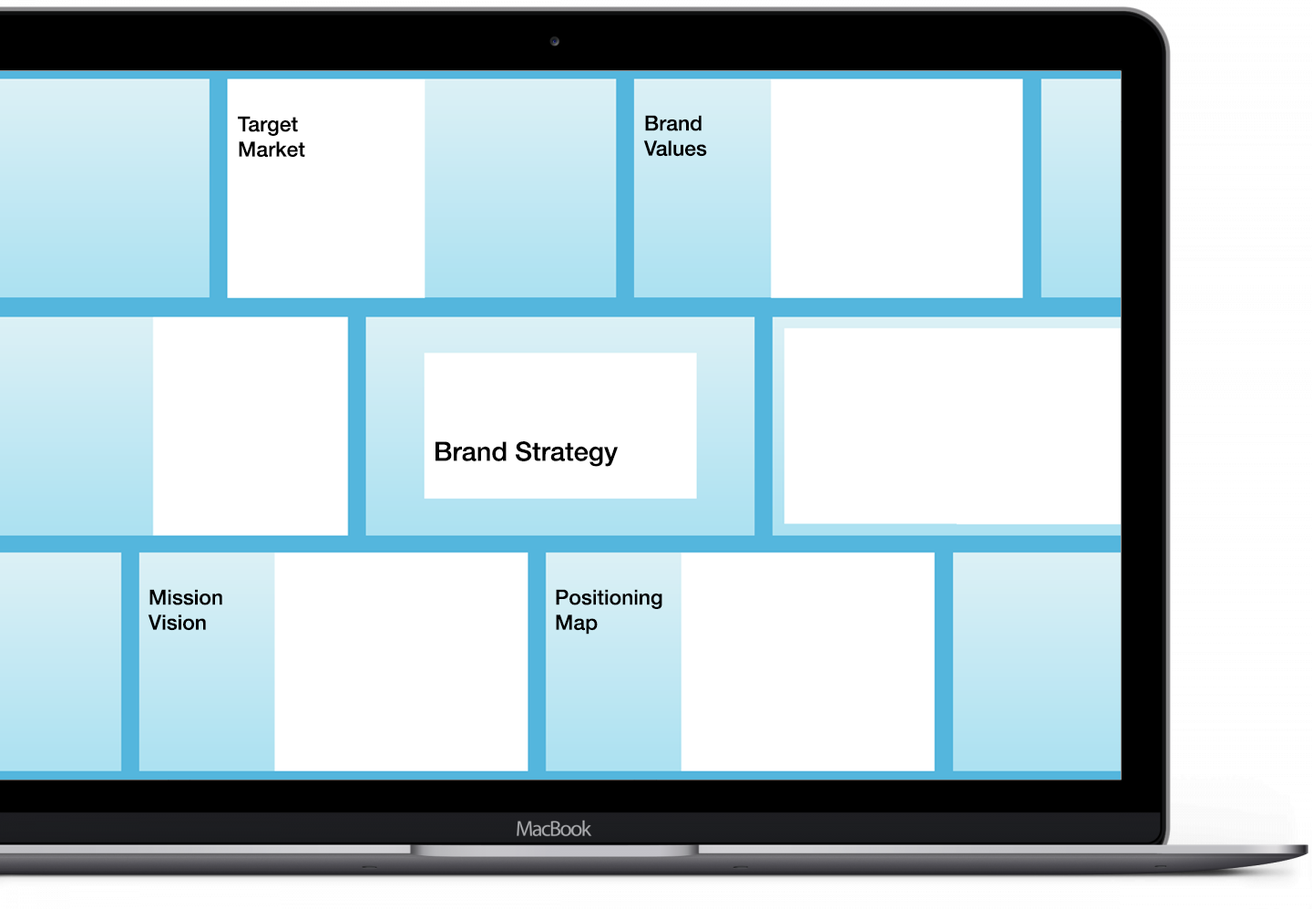
<style>
.page{position:relative;width:1312px;height:909px;background:#ffffff}
.page>*{position:absolute;margin:0}
.t1{font:20.9px "HelveticaNeue-Medium";color:#000000}
.t2{font:26.4px "HelveticaNeue-Medium";color:#000000}
</style>
<div class="page">
<p class="t1" style="left:238px;top:116px;width:67px;height:42px">Target <br>Market</p>
<p class="t1" style="left:643px;top:115px;width:64px;height:42px">Brand<br>Values</p>
<p class="t2" style="left:436px;top:441px;width:182px;height:26px">Brand Strategy</p>
<p class="t1" style="left:148px;top:589px;width:74px;height:42px">Mission<br>Vision</p>
<p class="t1" style="left:556px;top:589px;width:107px;height:45px">Positioning <br>Map</p>
</div>
